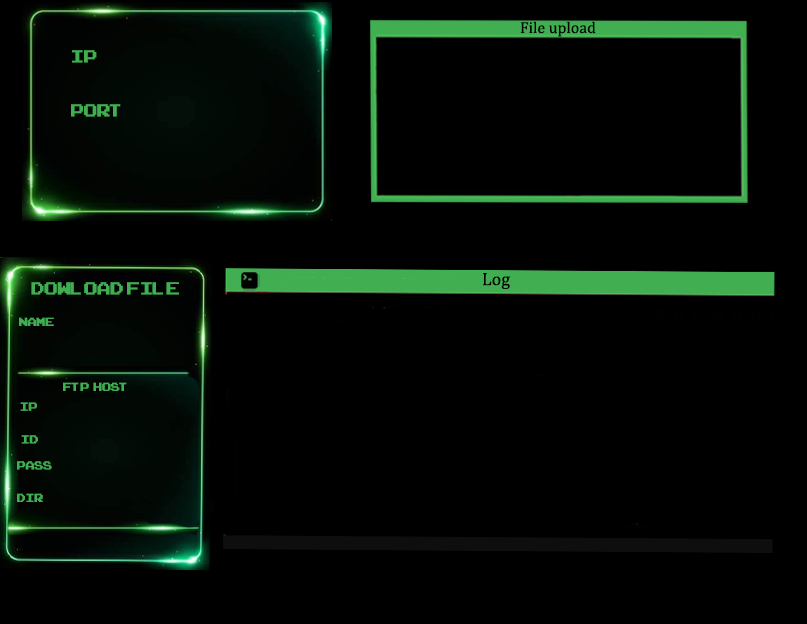
<style>
.page{position:relative;width:807px;height:624px;background:#000000}
.page>*{position:absolute;margin:0}
.t1{font:16px "CambriaMath";color:#000000}
.t2{font:24px "ArcadeClassic";color:#41af51}
.t3{font:18px "CambriaMath";color:#000000}
.t4{font:16px "ArcadeClassic";color:#41af51}
</style>
<div class="page">
<p class="t1" style="left:520px;top:21px;width:76px;height:16px">File upload</p>
<p class="t2" style="left:72px;top:50px;width:25px;height:13px">IP</p>
<p class="t2" style="left:71px;top:104px;width:50px;height:13px">PORT</p>
<p class="t3" style="left:483px;top:273px;width:27px;height:17px">Log</p>
<p class="t2" style="left:31px;top:282px;width:148px;height:13px">DOWLOAD FILE</p>
<p class="t4" style="left:19px;top:317px;width:35px;height:9px">Name</p>
<p class="t4" style="left:63px;top:382px;width:64px;height:9px">FTP  HOST</p>
<p class="t4" style="left:20px;top:402px;width:17px;height:9px">IP</p>
<p class="t4" style="left:21px;top:435px;width:17px;height:9px">ID</p>
<p class="t4" style="left:17px;top:461px;width:35px;height:9px">Pass</p>
<p class="t4" style="left:17px;top:493px;width:26px;height:9px">Dir</p>
</div>
